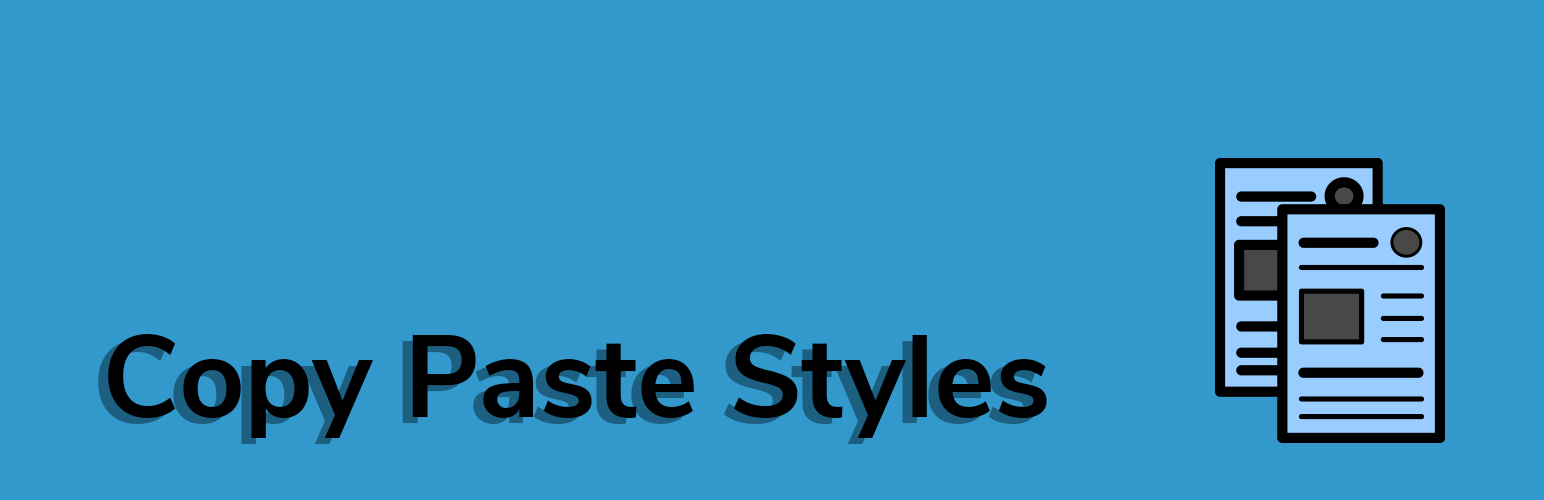
<style>
.page{position:relative;width:1544px;height:500px;background:#3399cc}
.page>*{position:absolute;margin:0}
.t1{font:114.6px "NunitoSans-Bold"}
.t2{font:114.6px "NunitoSans-Bold";color:#000000}
</style>
<div class="page">
<p class="t1" style="left:98px;top:340px;width:939px;height:104px">Copy Paste Styles</p>
<p class="t2" style="left:108px;top:334px;width:939px;height:104px">Copy Paste Styles</p>
</div>
